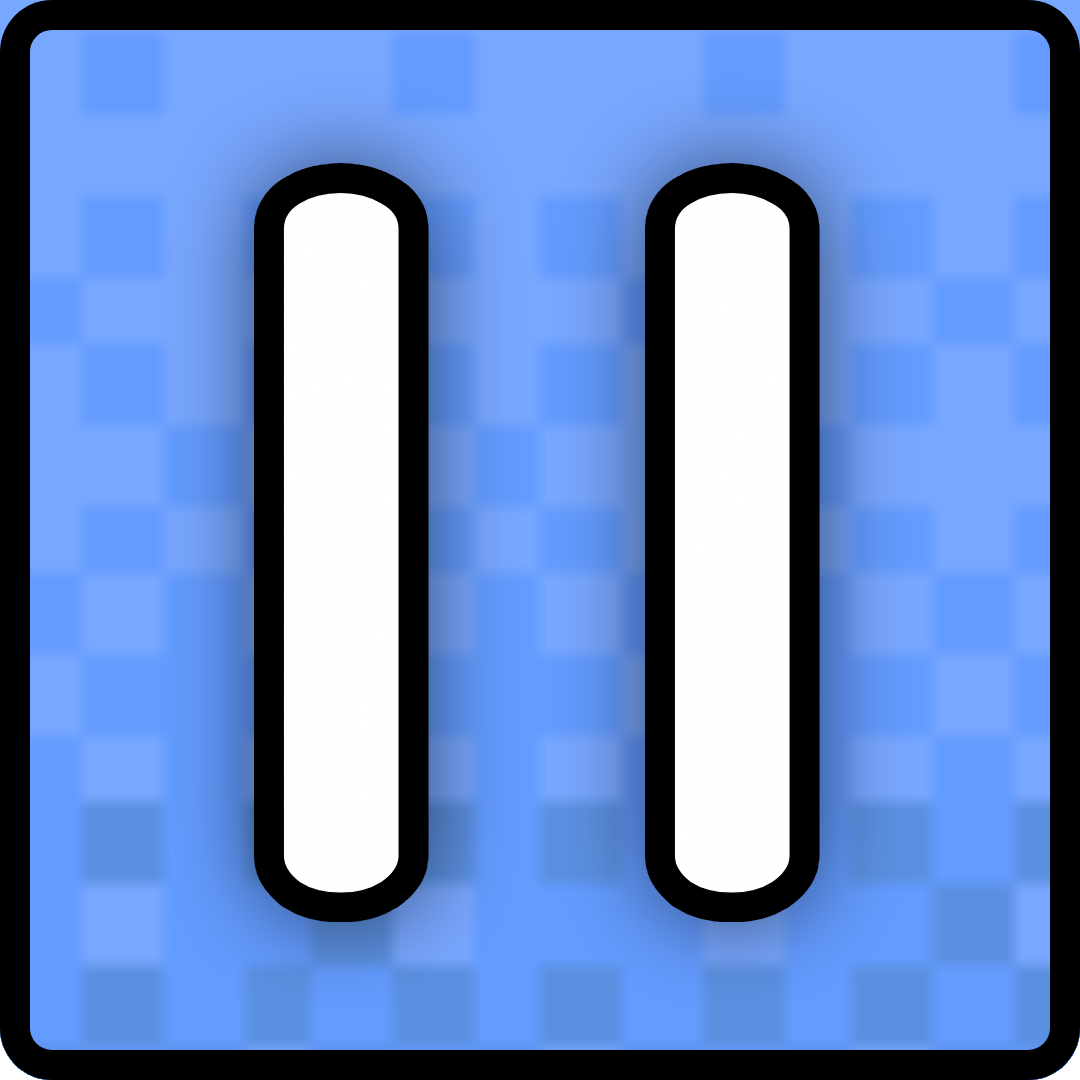
<style>
.page{position:relative;width:1080px;height:1080px;background:#000000}
.page>*{position:absolute;margin:0}
.t1{font:886.8px "Dosis-Bold";color:#ffffff}
</style>
<div class="page">
<p class="t1" style="left:283px;top:193px;width:507px;height:700px">| |</p>
</div>
